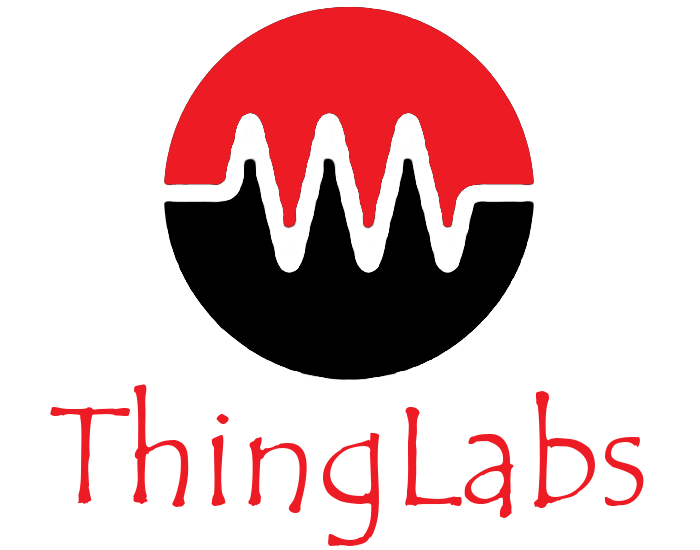
<style>
.page{position:relative;width:700px;height:550px;background:#ffffff}
.page>*{position:absolute;margin:0}
.t1{font:143px "TempusSansITC";color:#ed1c24}
</style>
<div class="page">
<p class="t1" style="left:50px;top:384px;width:594px;height:162px">ThingLabs</p>
</div>
